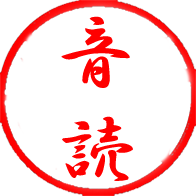
<style>
.page{position:relative;width:196px;height:196px;background:#ffffff}
.page>*{position:absolute;margin:0}
.t1{font:79.9px "HGGyoshotai";color:#fe0000}
</style>
<div class="page">
<p class="t1" style="left:61px;top:16px;width:72px;height:165px;text-align:center">音<br>読</p>
</div>
